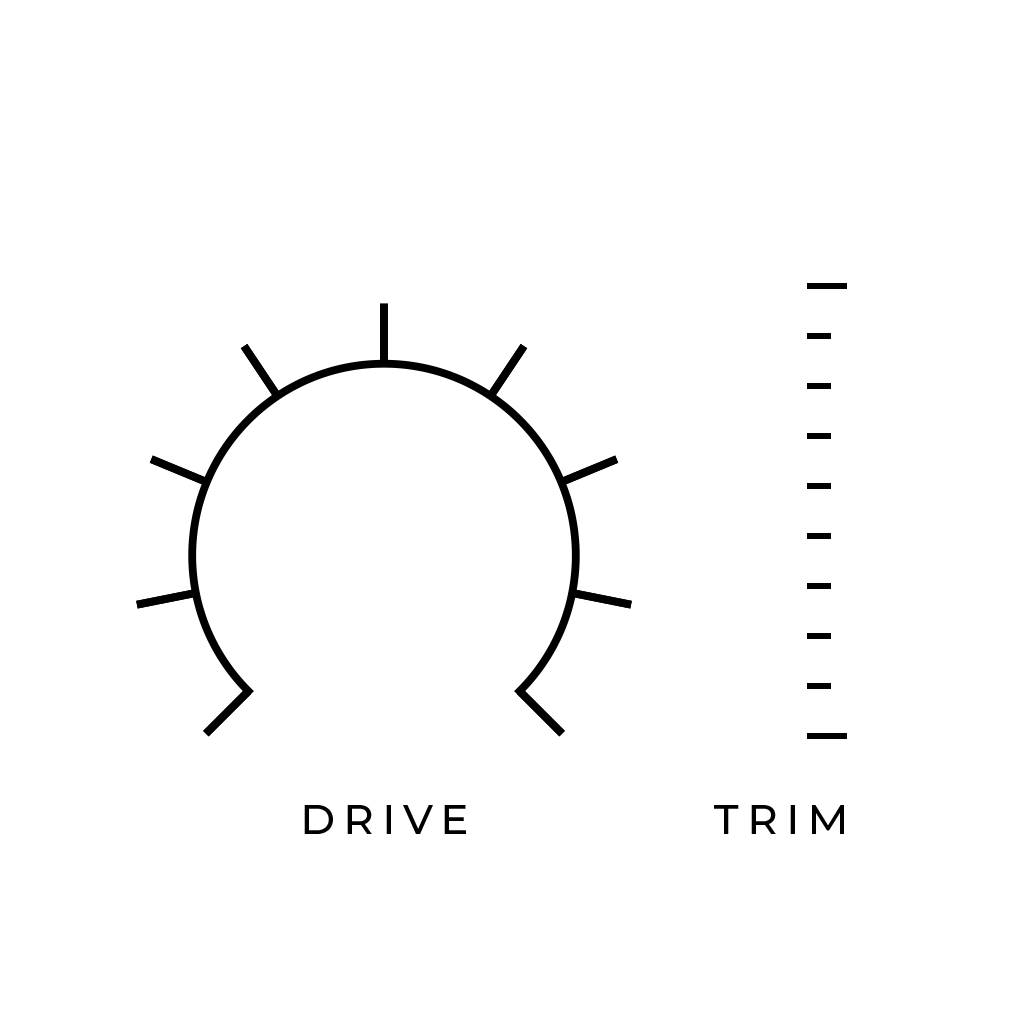
<style>
.page{position:relative;width:1024px;height:1024px;background:#ffffff}
.page>*{position:absolute;margin:0}
.t1{font:42px "Montserrat-Medium";letter-spacing:0.2em;color:#000000}
</style>
<div class="page">
<p class="t1" style="left:304px;top:805px;width:162px;height:29px">DRIVE</p>
<p class="t1" style="left:714px;top:805px;width:130px;height:29px">TRIM</p>
</div>
